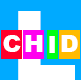
<style>
.page{position:relative;width:81px;height:80px;background:#00aaff}
.page>*{position:absolute;margin:0}
.t1{font:24px "Arial-Black";color:#ffffff}
</style>
<div class="page">
<p class="t1" style="left:3px;top:35px;width:18px;height:17px">C</p>
<p class="t1" style="left:25px;top:35px;width:18px;height:17px">H</p>
<p class="t1" style="left:49px;top:36px;width:6px;height:17px">I</p>
<p class="t1" style="left:61px;top:35px;width:17px;height:17px">D</p>
</div>
